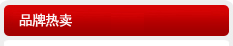
<style>
.page{position:relative;width:233px;height:46px}
.page>*{position:absolute;margin:0}
.t1{font:14px "SimHei";letter-spacing:-0.08em;color:#faf2f2;font-weight:bold}
</style>
<div class="page">
<p class="t1" style="left:19px;top:13px;width:53px;height:14px">品牌热卖</p>
</div>
